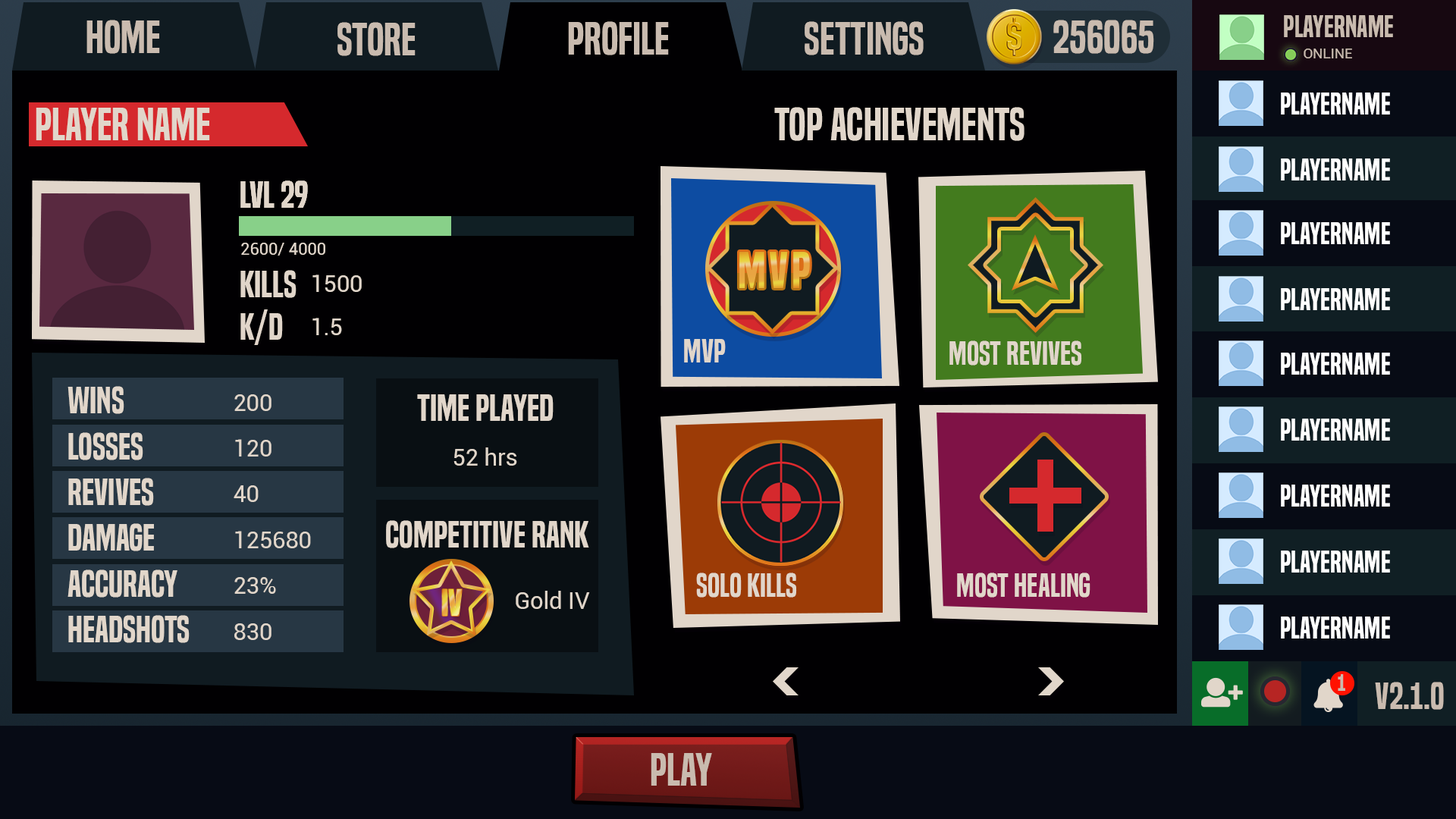
<style>
.page{position:relative;width:1456px;height:819px;background:#010002}
.page>*{position:absolute;margin:0}
.t1{font:28.4px "BuiltTitlingSb-Regular";color:#c9bbaf}
.t2{font:43.2px "BuiltTitlingSb-Regular";color:#c9bbaf}
.t3{font:14.1px "Roboto-Regular";color:#c9bbaf}
.t4{font:28.4px "BuiltTitlingSb-Regular";color:#ffffff}
.t5{font:43.2px "BuiltTitlingSb-Regular";color:#e1d6ca}
.t6{font:35.5px "BuiltTitlingSb-Regular";color:#e1d6ca}
.t7{font:16.6px "Roboto-Regular";color:#e1d6ca}
.t8{font:23.2px "Roboto-Regular";color:#e1d6ca}
.t9{font:31.2px "BuiltTitlingSb-Regular";color:#e1d6ca}
.t10{font:35.5px/45.8px "BuiltTitlingSb-Regular";color:#e1d6ca}
.t11{font:23.2px/45.8px "Roboto-Regular";color:#e1d6ca}
.t12{font:35.5px "BuiltTitlingSb-Regular"}
.t13{font:21.8px "BuiltTitlingSb-Regular";color:#c9bbaf}
.t14{font:35.8px "BuiltTitlingSb-Regular";color:#c9bbaf}
</style>
<div class="page">
<p class="t1" style="left:1284px;top:15px;width:109px;height:22px">PLayerName</p>
<p class="t2" style="left:86px;top:20px;width:74px;height:34px">HOME</p>
<p class="t2" style="left:337px;top:22px;width:79px;height:34px">Store</p>
<p class="t2" style="left:568px;top:21px;width:101px;height:34px">PROFILE</p>
<p class="t2" style="left:805px;top:21px;width:119px;height:34px">Settings</p>
<p class="t2" style="left:1053px;top:20px;width:101px;height:34px">256065</p>
<p class="t3" style="left:1304px;top:49px;width:48px;height:9px">ONLINE</p>
<p class="t4" style="left:1281px;top:93px;width:109px;height:22px">PLayerName</p>
<p class="t5" style="left:36px;top:108px;width:174px;height:32px">Player Name</p>
<p class="t5" style="left:774px;top:107px;width:250px;height:34px">TOP ACHIEVEMENTS</p>
<p class="t4" style="left:1281px;top:158px;width:109px;height:22px">PLayerName</p>
<p class="t6" style="left:240px;top:180px;width:68px;height:28px">Lvl 29</p>
<p class="t6" style="left:240px;top:180px;width:68px;height:28px">Lvl 29</p>
<p class="t4" style="left:1281px;top:222px;width:109px;height:22px">PLayerName</p>
<p class="t7" style="left:241px;top:243px;width:84px;height:13px">2600/ 4000</p>
<p class="t6" style="left:240px;top:270px;width:57px;height:75px">Kills<br>K/D</p>
<p class="t8" style="left:312px;top:275px;width:50px;height:17px">1500</p>
<p class="t4" style="left:1281px;top:288px;width:109px;height:22px">PLayerName</p>
<p class="t8" style="left:312px;top:318px;width:30px;height:17px">1.5</p>
<p class="t9" style="left:684px;top:339px;width:42px;height:23px">MVP</p>
<p class="t9" style="left:949px;top:340px;width:133px;height:26px">Most revives</p>
<p class="t4" style="left:1281px;top:353px;width:109px;height:22px">PLayerName</p>
<p class="t10" style="left:67px;top:386px;width:123px;height:257px">Wins<br>Losses<br>Revives<br>Damage <br>accuracy<br>headshots</p>
<p class="t10" style="left:67px;top:386px;width:123px;height:257px">Wins<br>Losses<br>Revives<br>Damage <br>accuracy<br>headshots</p>
<p class="t11" style="left:234px;top:394px;width:77px;height:246px">200<br>120<br>40<br>125680<br>23%<br>830</p>
<p class="t11" style="left:234px;top:394px;width:77px;height:246px">200<br>120<br>40<br>125680<br>23%<br>830</p>
<p class="t6" style="left:417px;top:394px;width:137px;height:27px">Time PLayed</p>
<p class="t4" style="left:1281px;top:419px;width:109px;height:22px">PLayerName</p>
<p class="t8" style="left:453px;top:447px;width:64px;height:19px">52 hrs</p>
<p class="t4" style="left:1281px;top:485px;width:109px;height:22px">PLayerName</p>
<p class="t6" style="left:386px;top:520px;width:203px;height:28px">Competitive Rank</p>
<p class="t4" style="left:1281px;top:551px;width:109px;height:22px">PLayerName</p>
<p class="t9" style="left:696px;top:573px;width:101px;height:25px">Solo Kills</p>
<p class="t9" style="left:957px;top:573px;width:133px;height:25px">Most Healing</p>
<p class="t12" style="left:442px;top:589px;width:20px;height:27px">IV</p>
<p class="t8" style="left:516px;top:591px;width:74px;height:18px">Gold IV</p>
<p class="t4" style="left:1281px;top:617px;width:109px;height:22px">PLayerName</p>
<p class="t13" style="left:1338px;top:674px;width:7px;height:17px">1</p>
<p class="t14" style="left:1375px;top:682px;width:69px;height:28px">v2.1.0</p>
<p class="t2" style="left:651px;top:753px;width:61px;height:33px">PLAY</p>
</div>
